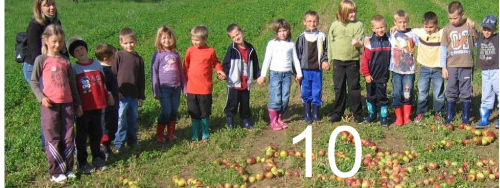
<style>
.page{position:relative;width:500px;height:188px}
.page>*{position:absolute;margin:0}
.t1{font:72px "ArialMT";color:#ffffff}
</style>
<div class="page">
<p class="t1" style="left:292px;top:125px;width:70px;height:53px">10</p>
</div>
